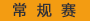
<style>
.page{position:relative;width:90px;height:21px;background:#f39c12}
.page>*{position:absolute;margin:0}
.t1{font:14.6px "MicrosoftYaHei";letter-spacing:0.64em;color:#333333;font-weight:bold}
</style>
<div class="page">
<p class="t1" style="left:13px;top:2px;width:63px;height:16px">常规赛</p>
</div>
